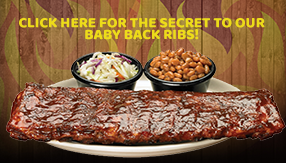
<style>
.page{position:relative;width:286px;height:163px}
.page>*{position:absolute;margin:0}
.t1{font:15.1px/11.8px "BalooPaaji-Regular";color:#eddc19}
</style>
<div class="page">
<p class="t1" style="left:19px;top:18px;width:246px;height:22px;text-align:center">CLICK HERE FOR THE SECRET TO OUR<br>BABY BACK RIBS!</p>
</div>
